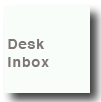
<style>
.page{position:relative;width:101px;height:102px;background:#f8fdfa}
.page>*{position:absolute;margin:0}
.t1{font:14px/18px "Helvetica-Bold";letter-spacing:0.075em;color:#7d7676}
</style>
<div class="page">
<p class="t1" style="left:8px;top:39px;width:41px;height:28px">Desk <br>inbox</p>
</div>
